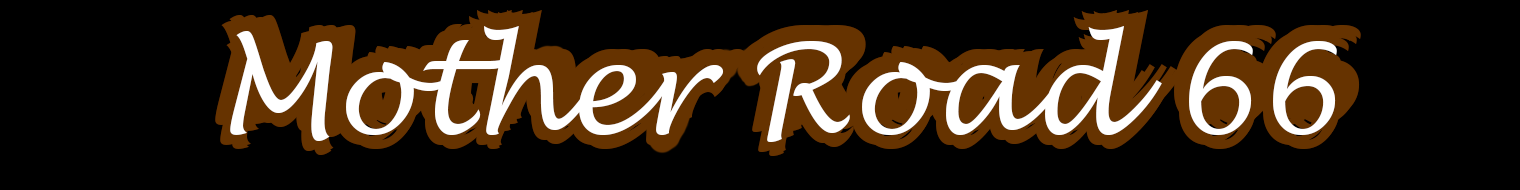
<style>
.page{position:relative;width:1520px;height:190px;background:#000000}
.page>*{position:absolute;margin:0}
.t1{font:125px "LucidaHandwriting-Italic";color:#ffffff}
.t2{font:125px "LucidaHandwriting-Italic"}
</style>
<div class="page">
<p class="t1" style="left:230px;top:26px;width:1107px;height:116px">Mother Road 66</p>
<p class="t2" style="left:224px;top:33px;width:1108px;height:116px">Mother Road 66</p>
</div>
